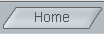
<style>
.page{position:relative;width:104px;height:34px;background:#b2bac1}
.page>*{position:absolute;margin:0}
.t1{font:14px "ArialMT";color:#545656}
</style>
<div class="page">
<p class="t1" style="left:35px;top:12px;width:34px;height:10px">Home</p>
</div>
